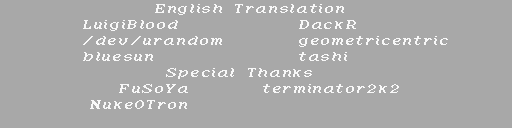
<style>
.page{position:relative;width:512px;height:128px;background:#a8a8a8}
.page>*{position:absolute;margin:0}
.t1{font:16px/16px "MarvelousATI";letter-spacing:0.04em;color:#f8f8f8}
</style>
<div class="page">
<p class="t1" style="left:83px;top:4px;width:365px;height:105px">English Translation<br> LuigiBlood    DackR<br> /dev/urandom   geometricentric<br> bluesun    tashi<br>    Special Thanks<br>  FuSoYa   terminator2k2<br>  NukeOTron</p>
</div>
